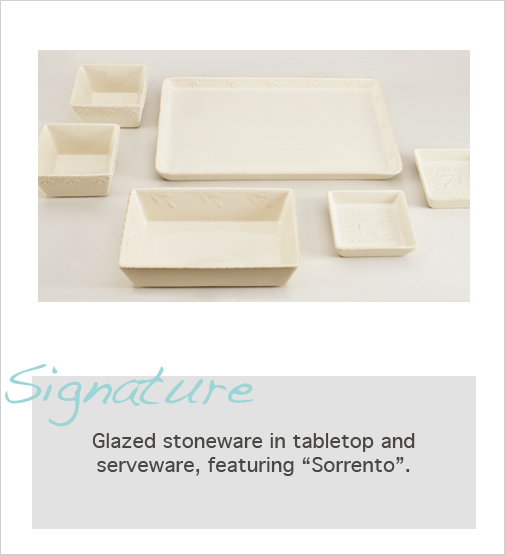
<style>
.page{position:relative;width:506px;height:556px;background:#ffffff}
.page>*{position:absolute;margin:0}
.t1{font:56px "Handwriting-Dakota";color:#9bd5d5}
.t2{font:20px "Geneva";color:#484743}
</style>
<div class="page">
<p class="t1" style="left:5px;top:363px;width:250px;height:64px">Signature</p>
<p class="t2" style="left:92px;top:433px;width:323px;height:43px;text-align:center">Glazed stoneware in tabletop and serveware, featuring “Sorrento”.</p>
</div>
